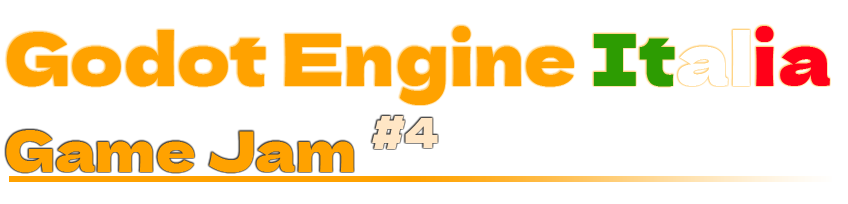
<style>
.page{position:relative;width:848px;height:204px;background:#ffffff}
.page>*{position:absolute;margin:0}
.t1{font:72.4px "DelaGothicOne-Regular";color:#ffa200}
.t2{font:72.4px "DelaGothicOne-Regular";color:#2d9c02}
.t3{font:72.4px "DelaGothicOne-Regular";color:#ffffff}
.t4{font:72.4px "DelaGothicOne-Regular";color:#ff0018}
.t5{font:55px "DelaGothicOne-Regular";color:#ffa200}
.t6{font:72.4px "DelaGothicOne-Regular";color:#000000}
.t7{font:72.4px "DelaGothicOne-Regular";letter-spacing:-0.046em;color:#ffe6c5;scale:0.9 1}
</style>
<div class="page">
<p class="t1" style="left:6px;top:26px;width:824px;height:79px">Godot Engine <span class="t2">It</span><span class="t3">al</span><span class="t4">ia</span></p>
<p class="t5" style="left:6px;top:116px;width:432px;height:57px"><span class="t6"><br></span>Game Jam <span class="t7">#4</span></p>
</div>
